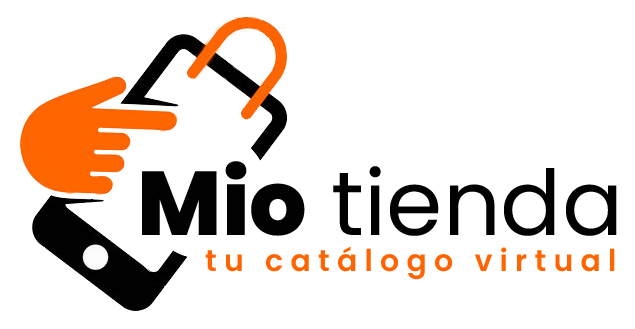
<style>
.page{position:relative;width:635px;height:329px;background:#ffffff}
.page>*{position:absolute;margin:0}
.t1{font:90.5px "Poppins-Regular";color:#010101}
.t2{font:90.5px "Poppins-ExtraBold";color:#010101}
.t3{font:30px "Poppins-SemiBold";letter-spacing:0.24em;color:#ff6400}
</style>
<div class="page">
<p class="t1" style="left:142px;top:161px;width:475px;height:75px"><span class="t2">Mio </span>tienda</p>
<p class="t3" style="left:205px;top:246px;width:410px;height:34px">tu catálogo virtual</p>
</div>
